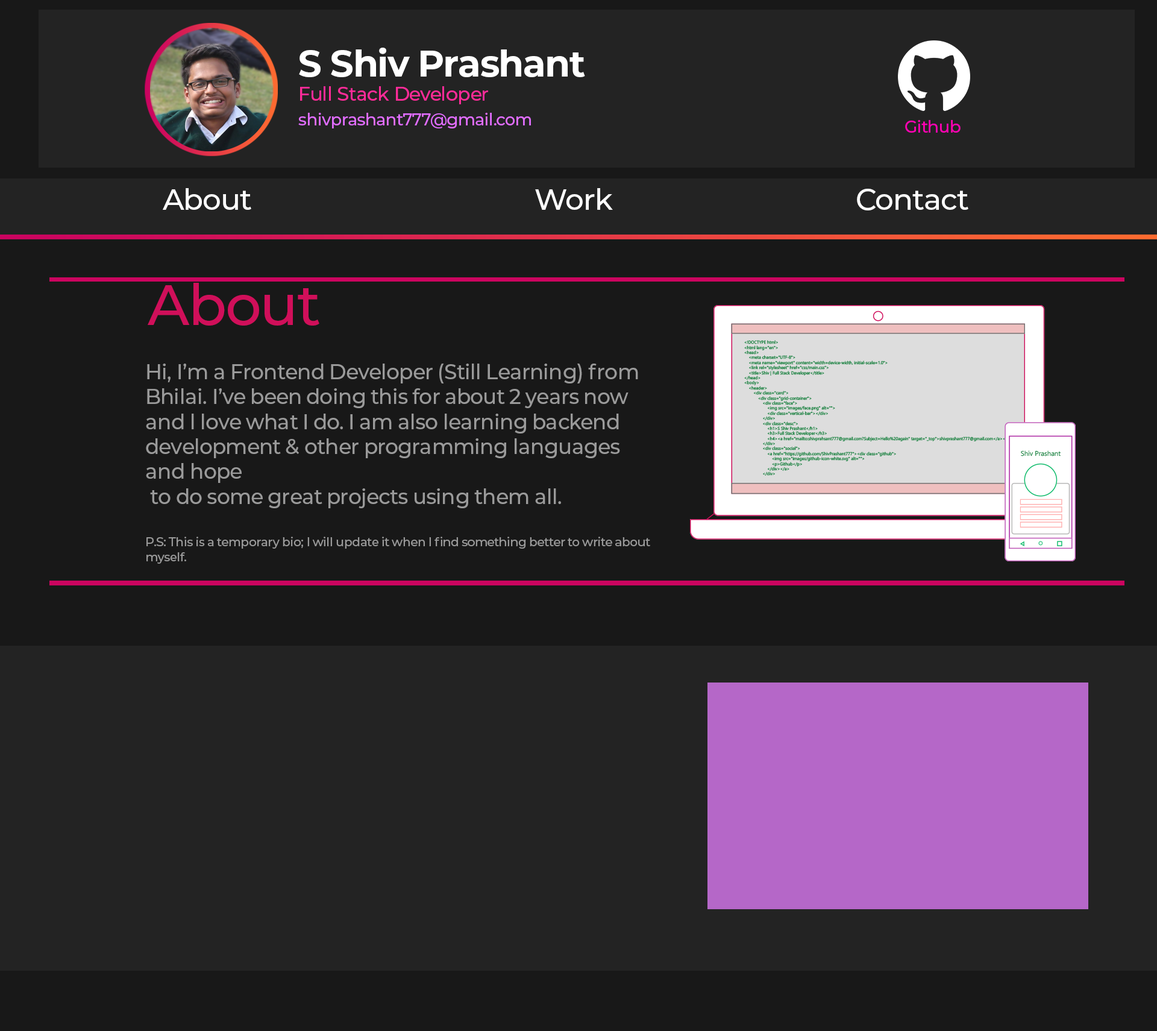
<style>
.page{position:relative;width:1157px;height:1031px;background:#232323}
.page>*{position:absolute;margin:0}
.t1{font:36.7px "Montserrat-Bold";letter-spacing:-0.024em;color:#ffffff}
.t2{font:19.1px "Montserrat-Medium";letter-spacing:-0.024em;color:#ff2b99}
.t3{font:16.6px "Montserrat-Medium";letter-spacing:-0.024em;color:#e26eff}
.t4{font:16.6px "Montserrat-Medium";letter-spacing:-0.024em;color:#ff00b4}
.t5{font:29.3px "Montserrat-Medium";letter-spacing:-0.024em;color:#ffffff}
.t6{font:56.9px "Montserrat-Medium";letter-spacing:-0.024em;color:#d00f5a}
.t7{font:20.7px "Montserrat-Medium";letter-spacing:-0.024em;color:#9a9a9a}
.t8{font:12.2px "Montserrat-Medium";letter-spacing:-0.024em;color:#9a9a9a}
</style>
<div class="page">
<p class="t1" style="left:299px;top:48px;width:286px;height:29px">S Shiv Prashant</p>
<p class="t2" style="left:300px;top:86px;width:188px;height:18px">Full Stack Developer</p>
<p class="t3" style="left:298px;top:113px;width:233px;height:15px">shivprashant777@gmail.com</p>
<p class="t4" style="left:905px;top:120px;width:56px;height:13px">Github</p>
<p class="t5" style="left:163px;top:188px;width:805px;height:22px">About                                       Work                    Contact</p>
<p class="t6" style="left:148px;top:283px;width:171px;height:42px">About</p>
<p class="t7" style="left:146px;top:363px;width:504px;height:200px">Hi, I’m a Frontend Developer (Still Learning) from Bhilai. I’ve been doing this for about 2 years now and l love what I do. I am also learning backend development &amp; other programming languages and hope<br> to do some great projects using them all.<br><br><span class="t8">P.S: This is a temporary bio; I will update it when I find something better to write about myself.</span></p>
</div>
